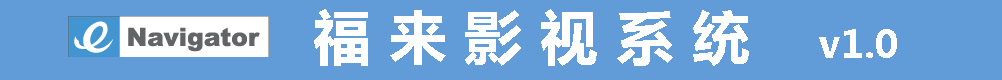
<style>
.page{position:relative;width:1002px;height:80px;background:#619bd8}
.page>*{position:absolute;margin:0}
.t1{font:58.3px "MicrosoftYaHei";color:#ffffff}
.t2{font:37.5px "MicrosoftYaHei";color:#ffffff}
</style>
<div class="page">
<p class="t1" style="left:314px;top:9px;width:583px;height:57px">福 来 影 视 系 统    <span class="t2">v1.0</span></p>
</div>
